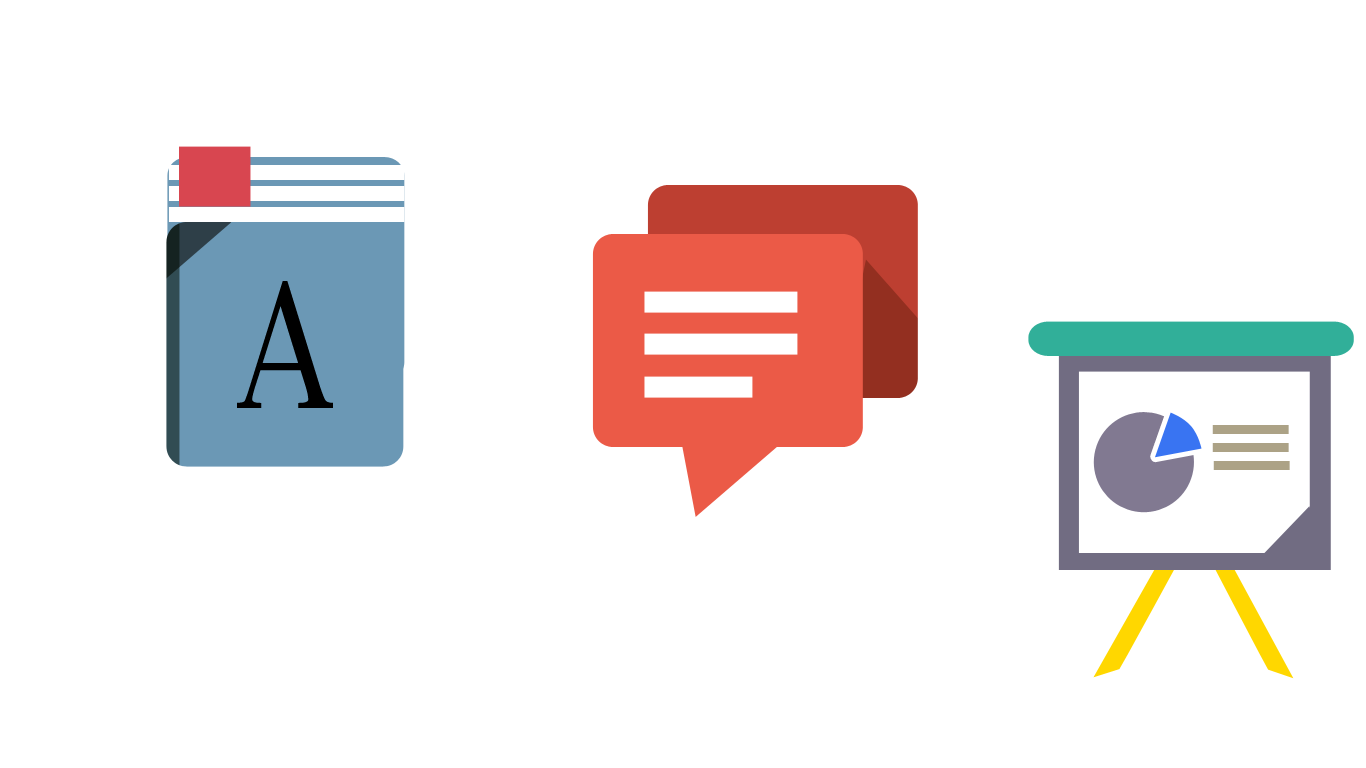
<style>
.page{position:relative;width:1366px;height:768px;background:#ffffff}
.page>*{position:absolute;margin:0}
.t1{font:172px "LucidaBright";letter-spacing:0.005em;color:#000000;scale:0.75 1}
</style>
<div class="page">
<p class="t1" style="left:237px;top:281px;width:96px;height:127px">A</p>
</div>
